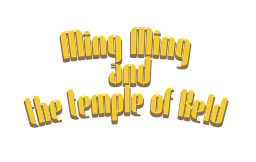
<style>
.page{position:relative;width:256px;height:162px;background:#ffffff}
.page>*{position:absolute;margin:0}
.t1{font:37.5px/29.2px "Trendgetter";color:#f4c733}
</style>
<div class="page">
<p class="t1" style="left:24px;top:26px;width:204px;height:98px;text-align:center">Ming Ming<br> and <br>the temple of Keld</p>
</div>
